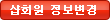
<style>
.page{position:relative;width:110px;height:20px}
.page>*{position:absolute;margin:0}
.t1{font:11px "Dotum";color:#ffffff;font-weight:bold}
</style>
<div class="page">
<p class="t1" style="left:10px;top:5px;width:86px;height:10px">샵회원 정보변경</p>
</div>
